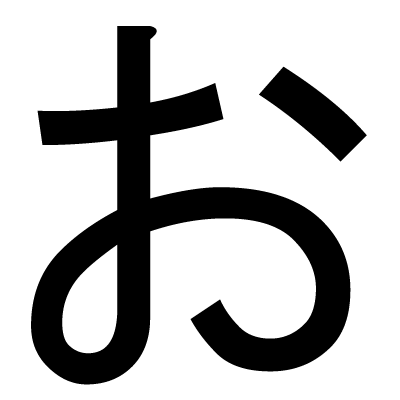
<style>
.page{position:relative;width:400px;height:400px;background:#ffffff}
.page>*{position:absolute;margin:0}
.t1{font:416.7px "MS-PGothic";color:#000000}
</style>
<div class="page">
<p class="t1" style="left:31px;top:26px;width:336px;height:359px">お</p>
</div>
